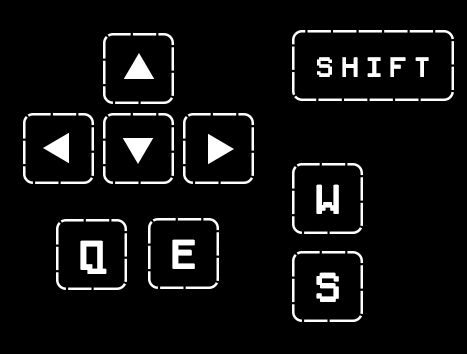
<style>
.page{position:relative;width:467px;height:354px;background:#000000}
.page>*{position:absolute;margin:0}
.t1{font:25px "PixelSplitter-Bold";color:#ffffff}
.t2{font:37px "PixelSplitter-Bold";color:#ffffff}
</style>
<div class="page">
<p class="t1" style="left:317px;top:57px;width:112px;height:20px">S h i f t</p>
<p class="t2" style="left:316px;top:184px;width:23px;height:30px">W</p>
<p class="t2" style="left:80px;top:240px;width:27px;height:34px">Q</p>
<p class="t2" style="left:172px;top:239px;width:23px;height:30px">E</p>
<p class="t2" style="left:316px;top:272px;width:23px;height:30px">S</p>
</div>
